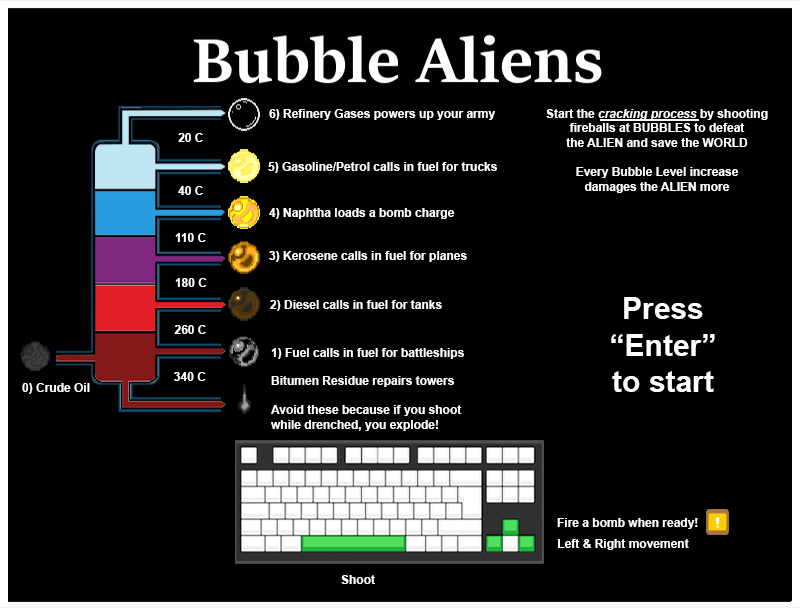
<style>
.page{position:relative;width:800px;height:608px;background:#000000}
.page>*{position:absolute;margin:0}
.t1{font:12.2px "Arial-BoldMT";color:#ffffff}
.t2{font:12.2px "Arial-BoldItalicMT";color:#ffffff}
.t3{font:30.4px "Arial-BoldMT";color:#ffffff}
</style>
<div class="page">
<p class="t1" style="left:269px;top:109px;width:226px;height:11px">6) Refinery Gases powers up your army</p>
<p class="t1" style="left:546px;top:109px;width:222px;height:84px;text-align:center">Start the <span class="t2">cracking process</span> by shooting<br>fireballs at BUBBLES to defeat<br>the ALIEN and save the WORLD<br><br>Every Bubble Level increase<br>damages the ALIEN more</p>
<p class="t1" style="left:178px;top:133px;width:25px;height:9px">20 C</p>
<p class="t1" style="left:268px;top:162px;width:229px;height:11px">5) Gasoline/Petrol calls in fuel for trucks</p>
<p class="t1" style="left:178px;top:186px;width:25px;height:9px">40 C</p>
<p class="t1" style="left:269px;top:208px;width:186px;height:11px">4) Naphtha loads a bomb charge</p>
<p class="t1" style="left:175px;top:233px;width:31px;height:9px">110 C</p>
<p class="t1" style="left:269px;top:251px;width:198px;height:11px">3) Kerosene calls in fuel for planes</p>
<p class="t1" style="left:175px;top:278px;width:32px;height:9px">180 C</p>
<p class="t1" style="left:270px;top:300px;width:172px;height:11px">2) Diesel calls in fuel for tanks</p>
<p class="t3" style="left:611px;top:297px;width:104px;height:95px;text-align:center">Press<br>“Enter”<br>to start</p>
<p class="t1" style="left:174px;top:325px;width:32px;height:9px">260 C</p>
<p class="t1" style="left:271px;top:348px;width:193px;height:11px">1) Fuel calls in fuel for battleships</p>
<p class="t1" style="left:174px;top:372px;width:32px;height:9px">340 C</p>
<p class="t1" style="left:271px;top:376px;width:191px;height:55px">Bitumen Residue repairs towers<br><br>Avoid these because if you shoot<br>while drenched, you explode!</p>
<p class="t1" style="left:22px;top:383px;width:68px;height:11px">0) Crude Oil</p>
<p class="t1" style="left:557px;top:518px;width:141px;height:11px">Fire a bomb when ready!</p>
<p class="t1" style="left:558px;top:539px;width:131px;height:11px">Left &amp; Right movement</p>
<p class="t1" style="left:341px;top:575px;width:34px;height:9px">Shoot</p>
</div>
